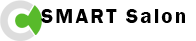
<style>
.page{position:relative;width:196px;height:41px;background:#ffffff}
.page>*{position:absolute;margin:0}
.t1{font:21px "FranklinGothic-Demi";letter-spacing:0.1em;color:#000000}
</style>
<div class="page">
<p class="t1" style="left:41px;top:9px;width:144px;height:14px">SMART Salon</p>
</div>
